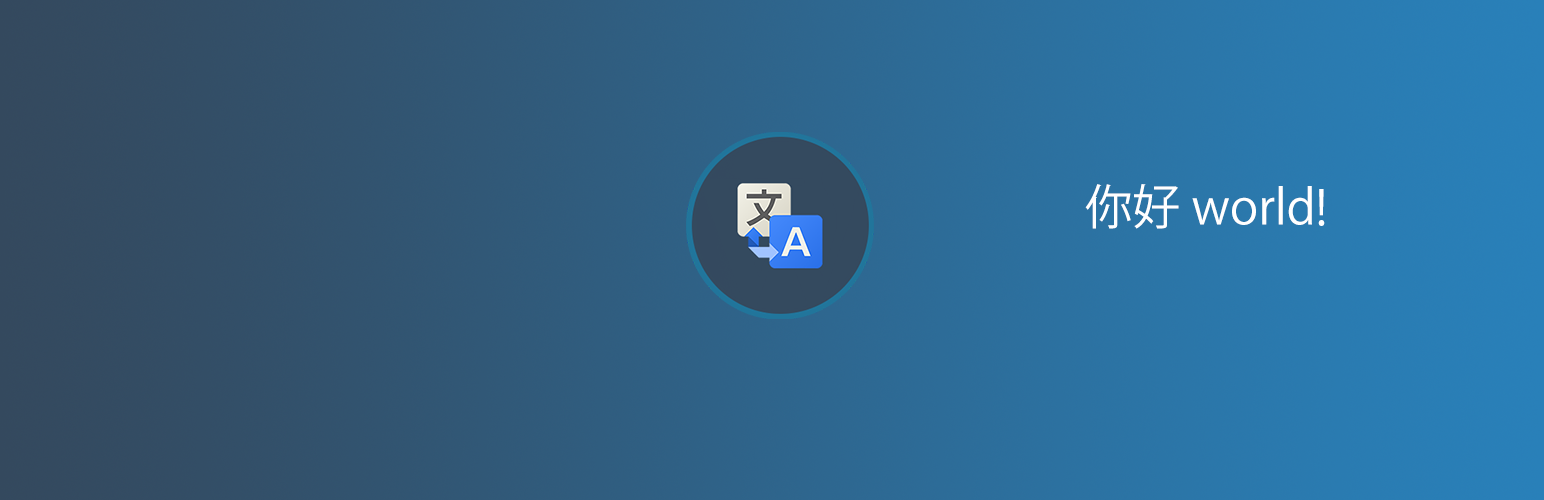
<style>
.page{position:relative;width:1544px;height:500px}
.page>*{position:absolute;margin:0}
.t1{font:48px "KozGoPr6N-Regular";color:#ffffff}
</style>
<div class="page">
<p class="t1" style="left:1085px;top:184px;width:227px;height:45px">你好 world</p>
<p class="t1" style="left:1318px;top:189px;width:7px;height:37px">!</p>
</div>
